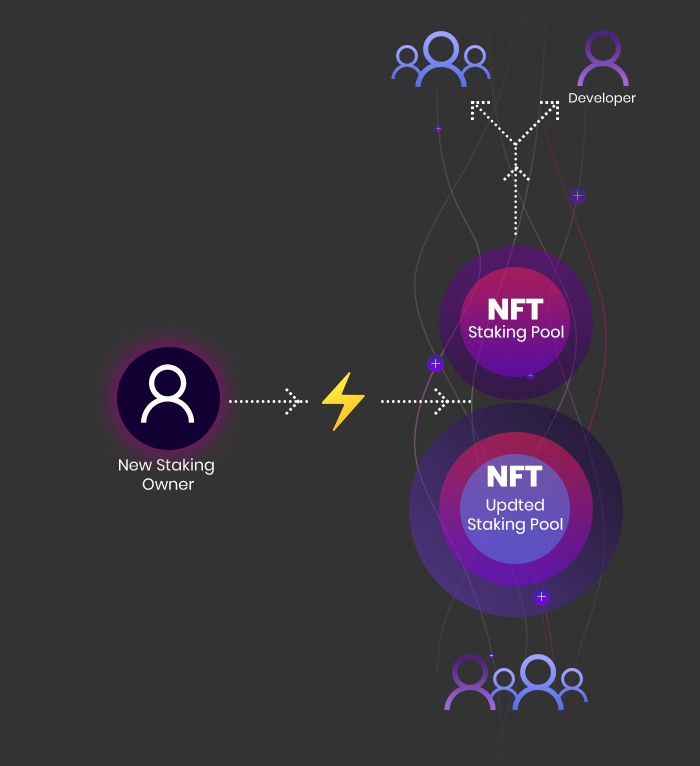
<style>
.page{position:relative;width:700px;height:766px;background:#333333}
.page>*{position:absolute;margin:0}
.t1{font:13.3px "Poppins-Regular";color:#ffffff}
.t2{font:6px "Poppins-Thin"}
.t3{font:12px "Poppins-Thin"}
.t4{font:29.3px "Poppins-ExtraBold";color:#ffffff}
.t5{font:16px "Poppins-Regular";color:#ffffff}
.t6{font:3.6px "Poppins-Thin"}
</style>
<div class="page">
<p class="t1" style="left:569px;top:92px;width:67px;height:14px">Developer</p>
<p class="t2" style="left:436px;top:126px;width:5px;height:5px">+</p>
<p class="t3" style="left:573px;top:191px;width:9px;height:9px">+</p>
<p class="t4" style="left:488px;top:298px;width:56px;height:22px">NFT</p>
<p class="t5" style="left:469px;top:325px;width:95px;height:17px">Staking Pool</p>
<p class="t3" style="left:431px;top:359px;width:9px;height:9px">+</p>
<p class="t2" style="left:528px;top:373px;width:5px;height:5px">+</p>
<p class="t5" style="left:119px;top:458px;width:95px;height:32px;text-align:center">New Staking <br>Owner</p>
<p class="t4" style="left:487px;top:465px;width:56px;height:22px">NFT</p>
<p class="t5" style="left:468px;top:498px;width:95px;height:36px;text-align:center">Updted<br>Staking Pool</p>
<p class="t3" style="left:537px;top:592px;width:9px;height:9px">+</p>
<p class="t6" style="left:490px;top:654px;width:3px;height:3px">+</p>
</div>
